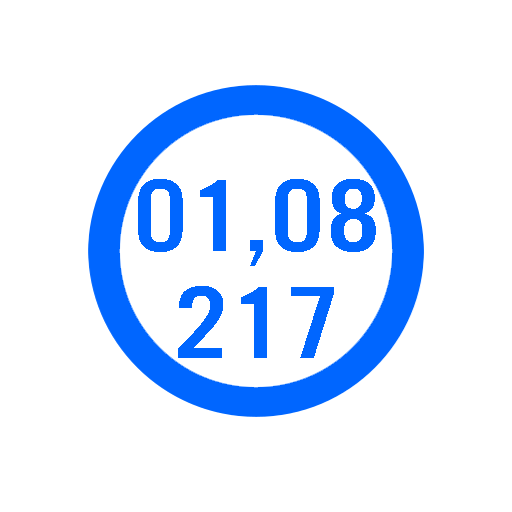
<style>
.page{position:relative;width:512px;height:512px;background:#ffffff}
.page>*{position:absolute;margin:0}
.t1{font:106.7px/106.7px "UTM-Alter-Gothic";letter-spacing:0.01em;color:#0066ff;scale:1.25 1}
</style>
<div class="page">
<p class="t1" style="left:138px;top:179px;width:238px;height:179px;text-align:center">01,08<br>217</p>
</div>
